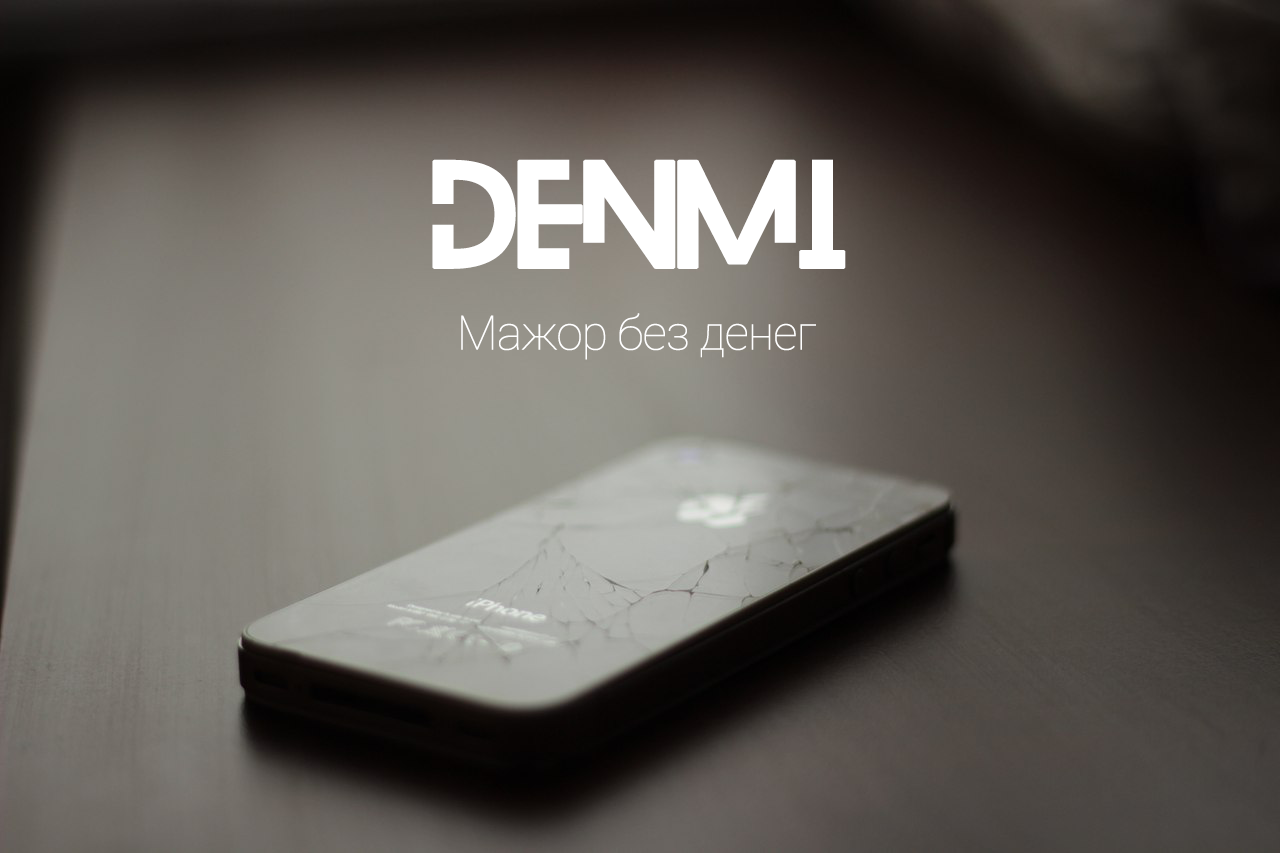
<style>
.page{position:relative;width:1280px;height:853px}
.page>*{position:absolute;margin:0}
.t1{font:136px "Blanka-Regular";letter-spacing:-0.015em;color:#ffffff}
.t2{font:48px "Roboto-Thin";letter-spacing:-0.015em;color:#ffffff}
</style>
<div class="page">
<p class="t1" style="left:432px;top:159px;width:414px;height:110px">Denmi</p>
<p class="t2" style="left:461px;top:313px;width:355px;height:47px">Мажор без денег</p>
</div>
